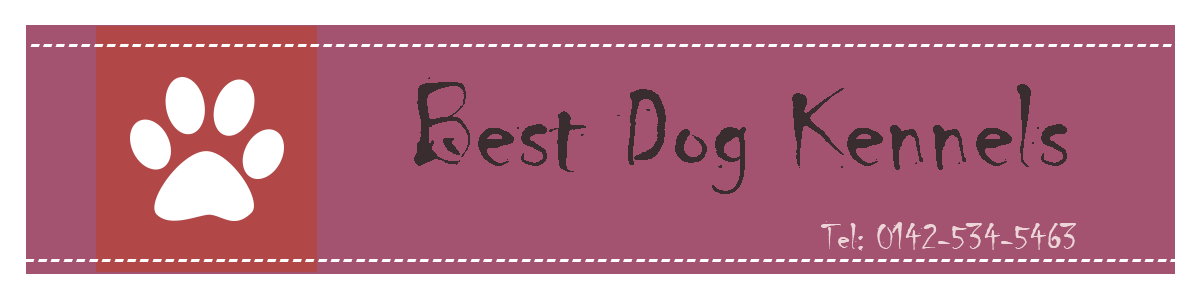
<style>
.page{position:relative;width:1200px;height:300px;background:#a3536f}
.page>*{position:absolute;margin:0}
.t1{font:25px "Magneto-Bold";color:#ffffff}
.t2{font:125px "Chiller-Regular";color:#392d30}
.t3{font:37.5px "Chiller-Regular";color:#edd4d9}
</style>
<div class="page">
<p class="t1" style="left:30px;top:44px;width:1168px;height:3px">--------------------------------------------------------------------------------------------</p>
<p class="t2" style="left:414px;top:77px;width:653px;height:117px">Best Dog Kennels</p>
<p class="t3" style="left:821px;top:221px;width:255px;height:30px">Tel: 0142-534-5463</p>
</div>
